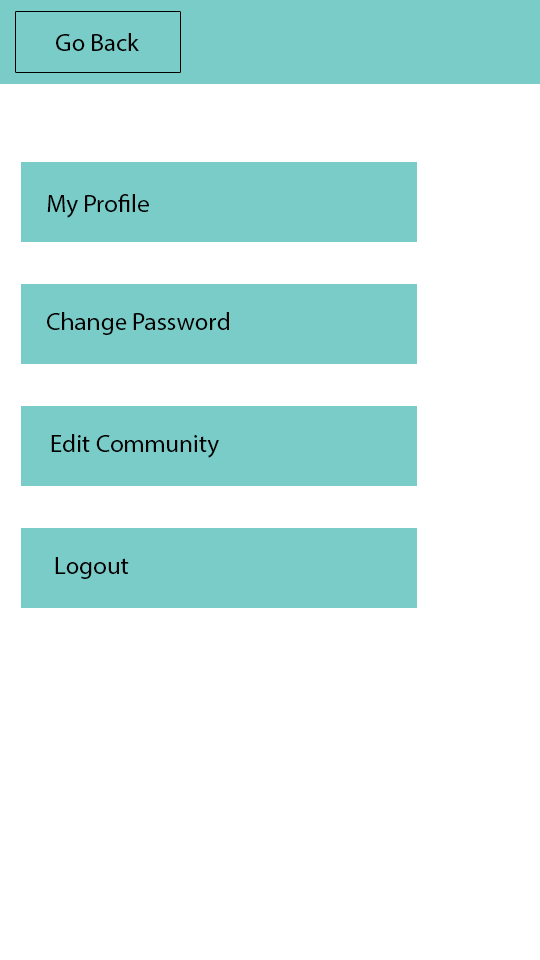
<style>
.page{position:relative;width:540px;height:960px;background:#ffffff}
.page>*{position:absolute;margin:0}
.t1{font:25px "MyriadPro-Regular";color:#000000}
</style>
<div class="page">
<p class="t1" style="left:56px;top:33px;width:83px;height:18px">Go Back</p>
<p class="t1" style="left:47px;top:194px;width:102px;height:24px">My Profile</p>
<p class="t1" style="left:47px;top:312px;width:182px;height:23px">Change Password</p>
<p class="t1" style="left:51px;top:434px;width:168px;height:24px">Edit Community</p>
<p class="t1" style="left:55px;top:557px;width:74px;height:22px">Logout</p>
</div>
